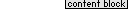
<style>
.page{position:relative;width:133px;height:10px;background:#ffffff}
.page>*{position:absolute;margin:0}
.t1{font:8px "Standard0755";color:#000000}
</style>
<div class="page">
<p class="t1" style="left:68px;top:0px;width:57px;height:7px">content block</p>
</div>
